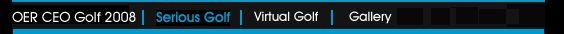
<style>
.page{position:relative;width:564px;height:34px;background:#141414}
.page>*{position:absolute;margin:0}
.t1{font:14px "AvantGardeITCbyBT-Medium";color:#f7f9fa}
.t2{font:14px "AvantGardeITCbyBT-Medium";color:#0099cc}
</style>
<div class="page">
<p class="t1" style="left:12px;top:11px;width:124px;height:11px">OER CEO Golf 2008</p>
<p class="t2" style="left:156px;top:11px;width:75px;height:12px">Serious Golf</p>
</div>
